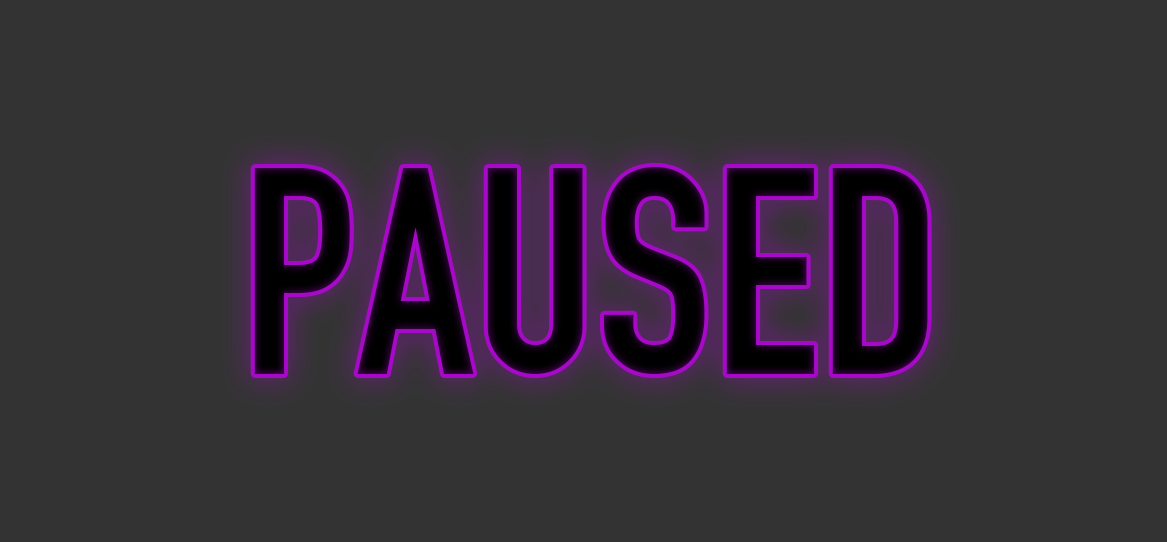
<style>
.page{position:relative;width:1167px;height:542px;background:#333333}
.page>*{position:absolute;margin:0}
.t1{font:287.3px "DINEngschrift";color:#030004}
</style>
<div class="page">
<p class="t1" style="left:254px;top:167px;width:674px;height:207px">PAUSED</p>
</div>
